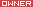
<style>
.page{position:relative;width:33px;height:7px;background:#e33b3b}
.page>*{position:absolute;margin:0}
.t1{font:8px "5x5-Pixel";color:#ffffff}
</style>
<div class="page">
<p class="t1" style="left:2px;top:1px;width:29px;height:5px">owner</p>
</div>
